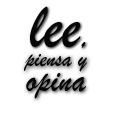
<style>
.page{position:relative;width:118px;height:118px;background:#ffffff}
.page>*{position:absolute;margin:0}
.t1{font:25px "BrushScriptMT";color:#070707;scale:0.92 1}
.t2{font:37.5px "BrushScriptMT";color:#070707;scale:0.92 1}
</style>
<div class="page">
<p class="t1" style="left:24px;top:54px;width:63px;height:18px">piensa y</p>
<p class="t2" style="left:26px;top:73px;width:60px;height:26px">opina</p>
</div>
